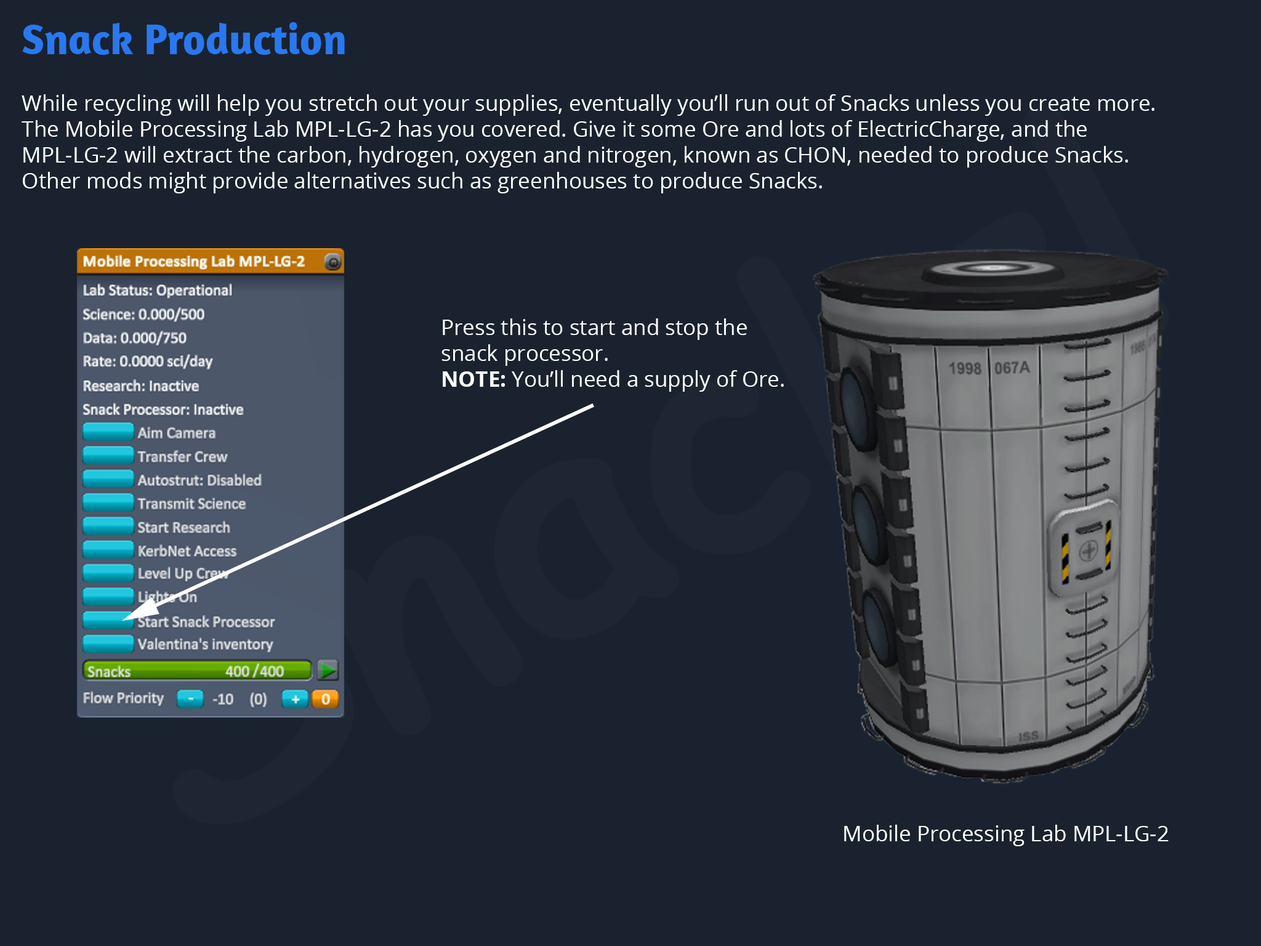
<style>
.page{position:relative;width:1261px;height:946px;background:#1a222f}
.page>*{position:absolute;margin:0}
.t1{font:43.1px "Amaranth-Bold";color:#2978ef}
.t2{font:21.5px "OpenSans";color:#ffffff}
.t3{font:21.5px "OpenSans-Bold";color:#ffffff}
</style>
<div class="page">
<p class="t1" style="left:22px;top:22px;width:323px;height:33px">Snack Production</p>
<p class="t2" style="left:22px;top:94px;width:1132px;height:99px">While recycling will help you stretch out your supplies, eventually you’ll run out of Snacks unless you create more. The Mobile Processing Lab MPL-LG-2 has you covered. Give it some Ore and lots of ElectricCharge, and the MPL-LG-2 will extract the carbon, hydrogen, oxygen and nitrogen, known as CHON, needed to produce Snacks. Other mods might provide alternatives such as greenhouses to produce Snacks.</p>
<p class="t2" style="left:441px;top:318px;width:343px;height:74px">Press this to start and stop the<br>snack processor.<br><span class="t3">NOTE:</span> You’ll need a supply of Ore.</p>
<p class="t2" style="left:844px;top:824px;width:325px;height:22px">Mobile Processing Lab MPL-LG-2</p>
</div>
